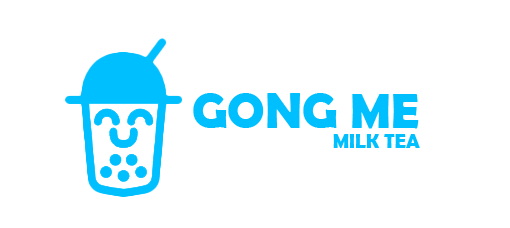
<style>
.page{position:relative;width:510px;height:228px;background:#ffffff}
.page>*{position:absolute;margin:0}
.t1{font:50px "BerlinSansFBDemi-Bold";color:#00bfff}
.t2{font:20px "BerlinSansFBDemi-Bold";color:#00bfff}
</style>
<div class="page">
<p class="t1" style="left:193px;top:93px;width:226px;height:36px">GONG ME</p>
<p class="t2" style="left:333px;top:134px;width:87px;height:14px">MILK TEA</p>
</div>
